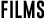
<style>
.page{position:relative;width:46px;height:19px;background:#ffffff}
.page>*{position:absolute;margin:0}
.t1{font:18px "Gobold";letter-spacing:0.025em;color:#000000}
</style>
<div class="page">
<p class="t1" style="left:1px;top:0px;width:43px;height:19px">FILMS</p>
</div>
